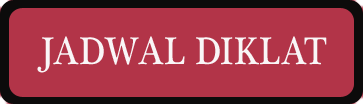
<style>
.page{position:relative;width:363px;height:104px;background:#b23448}
.page>*{position:absolute;margin:0}
.t1{font:39.6px "PlantagenetCherokee";color:#f9f6f7;scale:0.89 1}
</style>
<div class="page">
<p class="t1" style="left:37px;top:36px;width:290px;height:37px">JADWAL DIKLAT</p>
</div>
